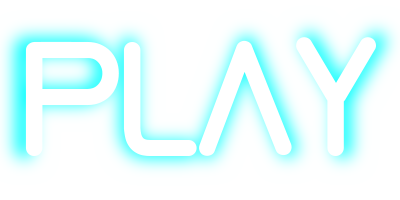
<style>
.page{position:relative;width:400px;height:200px;background:#ffffff}
.page>*{position:absolute;margin:0}
.t1{font:200px "bioliquid-Regular";color:#ffffff}
</style>
<div class="page">
<p class="t1" style="left:25px;top:37px;width:351px;height:119px">Play</p>
</div>
